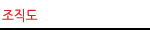
<style>
.page{position:relative;width:150px;height:30px;background:#ffffff}
.page>*{position:absolute;margin:0}
.t1{font:14px "NanumGothic";color:#dc241f;scale:0.9 1}
</style>
<div class="page">
<p class="t1" style="left:2px;top:9px;width:36px;height:14px">조직도</p>
</div>
